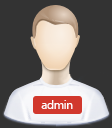
<style>
.page{position:relative;width:112px;height:128px;background:#333333}
.page>*{position:absolute;margin:0}
.t1{font:12.5px "SegoeUI";letter-spacing:-0.05em;color:#ffffff}
</style>
<div class="page">
<p class="t1" style="left:41px;top:100px;width:32px;height:9px">admin</p>
</div>
